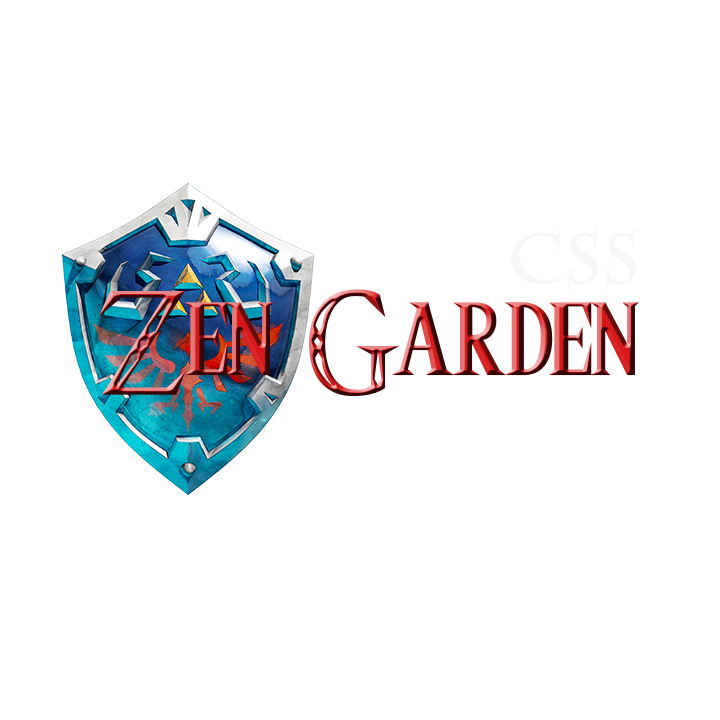
<style>
.page{position:relative;width:720px;height:720px;background:#ffffff}
.page>*{position:absolute;margin:0}
.t1{font:70px "CharlemagneStd-Bold";letter-spacing:-0.01em;color:#f7f7f7}
.t2{font:120px "Triforce";letter-spacing:-0.01em}
</style>
<div class="page">
<p class="t1" style="left:511px;top:228px;width:125px;height:62px">css</p>
<p class="t2" style="left:99px;top:289px;width:540px;height:107px">Zen Garden</p>
</div>
